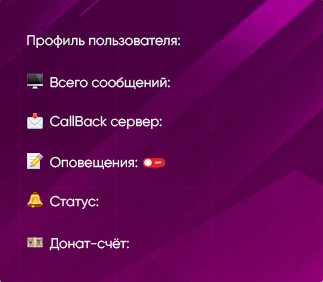
<style>
.page{position:relative;width:323px;height:282px}
.page>*{position:absolute;margin:0}
.t1{font:14px "Gilroy-Regular";color:#ffffff}
</style>
<div class="page">
<p class="t1" style="left:27px;top:35px;width:153px;height:13px">Профиль пользователя:</p>
<p class="t1" style="left:50px;top:77px;width:120px;height:13px">Всего сообщений:</p>
<p class="t1" style="left:50px;top:115px;width:112px;height:14px">CallBack сервер:</p>
<p class="t1" style="left:50px;top:156px;width:88px;height:14px">Оповещения:</p>
<p class="t1" style="left:50px;top:195px;width:49px;height:14px">Статус:</p>
<p class="t1" style="left:49px;top:238px;width:80px;height:13px">Донат-счёт:</p>
</div>
